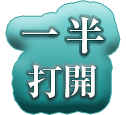
<style>
.page{position:relative;width:126px;height:115px;background:#ffffff}
.page>*{position:absolute;margin:0}
.t1{font:40px/48px "RyuminPr6N-ExBold";letter-spacing:0.2em;color:#fbfbf9}
.t2{font:36px/48px "RyuminPr6N-ExBold";color:#fbfbf9}
</style>
<div class="page">
<p class="t1" style="left:22px;top:17px;width:82px;height:81px;text-align:center">一半<br><span class="t2">打開</span></p>
</div>
